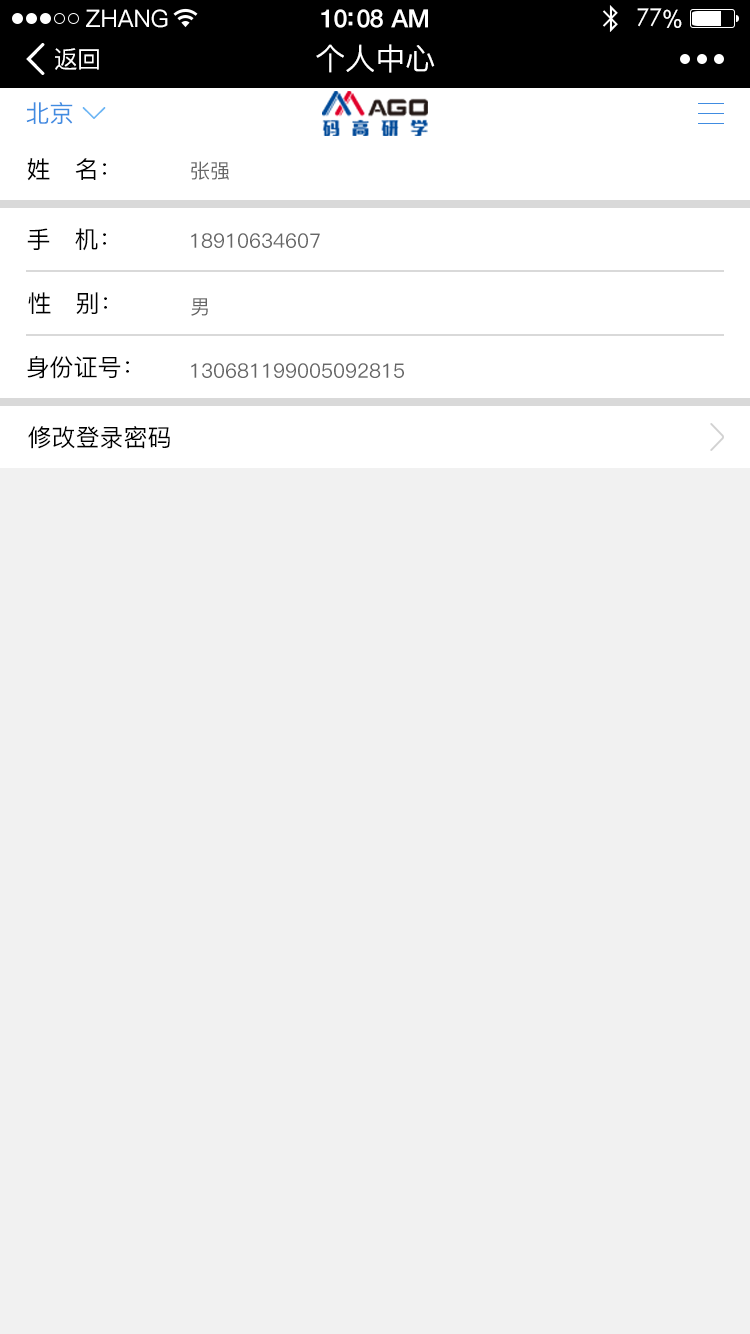
<style>
.page{position:relative;width:750px;height:1334px;background:#f1f1f1}
.page>*{position:absolute;margin:0}
.t1{font:24px "PingFang-SC-Medium";color:#ffffff}
.t2{font:25px "HelveticaNeue-Medium";letter-spacing:-0.02em;color:#ffffff}
.t3{font:24px "STXihei";letter-spacing:-0.02em;color:#ffffff}
.t4{font:24px "ArialUnicodeMS";letter-spacing:-0.02em;color:#ffffff}
.t5{font:24px "PingFang-SC-Medium";letter-spacing:-0.02em;color:#ffffff}
.t6{font:30px "PingFang-SC-Medium";color:#ffffff}
.t7{font:24px "PingFang-SC-Medium";color:#408ce1}
.t8{font:24px "PingFang-SC-Medium";color:#000000}
.t9{font:20px "PingFang-SC-Medium";color:#666666}
</style>
<div class="page">
<p class="t1" style="left:86px;top:9px;width:82px;height:19px">ZHANG</p>
<p class="t2" style="left:321px;top:9px;width:107px;height:19px">10:08 AM</p>
<p class="t3" style="left:637px;top:8px;width:45px;height:20px">77<span class="t4">%</span></p>
<p class="t5" style="left:55px;top:48px;width:44px;height:22px">返回</p>
<p class="t6" style="left:316px;top:44px;width:119px;height:29px">个人中心</p>
<p class="t7" style="left:26px;top:102px;width:47px;height:22px">北京</p>
<p class="t8" style="left:27px;top:158px;width:79px;height:23px">姓   名：</p>
<p class="t9" style="left:191px;top:161px;width:38px;height:19px">张强</p>
<p class="t8" style="left:27px;top:228px;width:79px;height:23px">手   机：</p>
<p class="t9" style="left:191px;top:233px;width:129px;height:15px">18910634607</p>
<p class="t8" style="left:28px;top:292px;width:79px;height:22px">性   别：</p>
<p class="t9" style="left:191px;top:298px;width:17px;height:18px">男</p>
<p class="t8" style="left:27px;top:356px;width:102px;height:23px">身份证号：</p>
<p class="t9" style="left:191px;top:363px;width:213px;height:15px">130681199005092815</p>
<p class="t8" style="left:28px;top:426px;width:142px;height:23px">修改登录密码</p>
</div>
